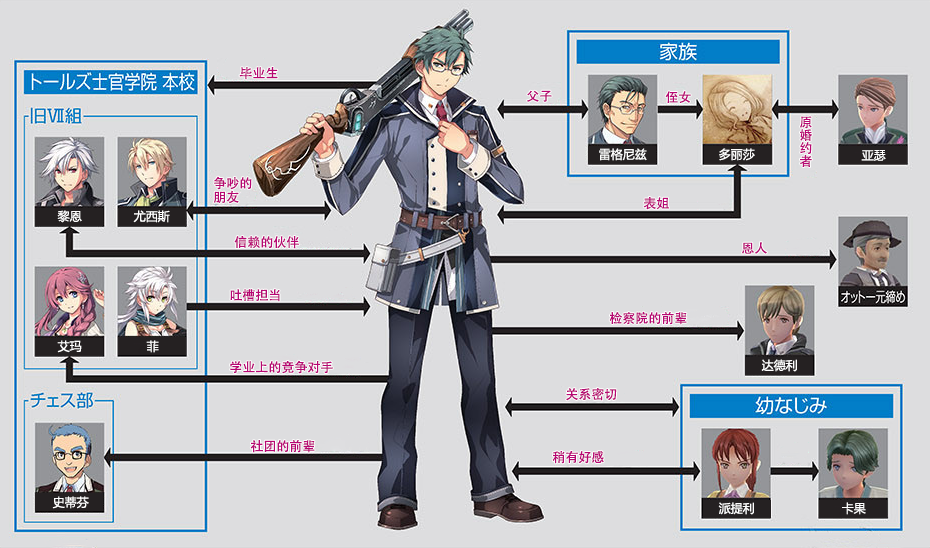
<style>
.page{position:relative;width:930px;height:548px;background:#dddddf}
.page>*{position:absolute;margin:0}
.t1{font:13px "AdobeHeitiStd-Regular";color:#b70773}
.t2{font:13px/13px "AdobeHeitiStd-Regular";color:#b70773}
.t3{font:12px "MicrosoftYaHei";color:#ffffff}
.t4{font:13px/14px "AdobeHeitiStd-Regular";color:#b70773}
</style>
<div class="page">
<p class="t1" style="left:239px;top:67px;width:39px;height:13px">毕业生</p>
<p class="t1" style="left:526px;top:90px;width:26px;height:12px">父子</p>
<p class="t1" style="left:665px;top:91px;width:26px;height:12px">侄女</p>
<p class="t2" style="left:799px;top:116px;width:13px;height:51px">原<br>婚<br>约<br>者</p>
<p class="t3" style="left:599px;top:148px;width:48px;height:13px">雷格尼兹</p>
<p class="t3" style="left:719px;top:148px;width:36px;height:13px">多丽莎</p>
<p class="t3" style="left:861px;top:150px;width:25px;height:11px">亚瑟</p>
<p class="t4" style="left:213px;top:176px;width:39px;height:28px">争吵的<br>朋友</p>
<p class="t1" style="left:643px;top:197px;width:26px;height:13px">表姐</p>
<p class="t3" style="left:57px;top:210px;width:25px;height:13px">黎恩</p>
<p class="t3" style="left:133px;top:210px;width:37px;height:13px">尤西斯</p>
<p class="t1" style="left:234px;top:236px;width:65px;height:13px">信赖的伙伴</p>
<p class="t1" style="left:742px;top:242px;width:25px;height:12px">恩人</p>
<p class="t1" style="left:230px;top:289px;width:50px;height:13px">吐槽担当</p>
<p class="t1" style="left:609px;top:311px;width:78px;height:14px">检察院的前辈</p>
<p class="t3" style="left:57px;top:340px;width:25px;height:13px">艾玛</p>
<p class="t3" style="left:146px;top:340px;width:13px;height:13px">菲</p>
<p class="t1" style="left:230px;top:360px;width:103px;height:14px">学业上的竞争对手</p>
<p class="t3" style="left:761px;top:359px;width:36px;height:13px">达德利</p>
<p class="t1" style="left:566px;top:388px;width:51px;height:13px">关系密切</p>
<p class="t1" style="left:250px;top:440px;width:65px;height:13px">社团的前辈</p>
<p class="t1" style="left:552px;top:450px;width:52px;height:14px">稍有好感</p>
<p class="t3" style="left:52px;top:496px;width:37px;height:13px">史蒂芬</p>
<p class="t3" style="left:718px;top:502px;width:36px;height:13px">派提利</p>
<p class="t3" style="left:842px;top:502px;width:24px;height:13px">卡果</p>
</div>
